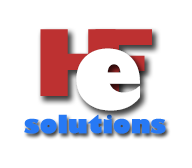
<style>
.page{position:relative;width:192px;height:168px;background:#ffffff}
.page>*{position:absolute;margin:0}
.t1{font:100px "GillSans-UltraBold";color:#ffffff;font-weight:bold}
.t2{font:24px "GillSans-UltraBold";color:#2779f4;font-weight:bold}
</style>
<div class="page">
<p class="t1" style="left:76px;top:48px;width:64px;height:63px">e</p>
<p class="t2" style="left:24px;top:114px;width:142px;height:20px">solutions</p>
</div>
